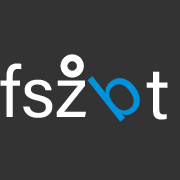
<style>
.page{position:relative;width:180px;height:180px;background:#333333}
.page>*{position:absolute;margin:0}
.t1{font:72px "AcuminConcept-Regular";color:#ffffff;font-weight:bold;font-style:italic}
.t2{font:72px "AcuminConcept-Regular";color:#0093dd;font-weight:bold;font-style:italic}
</style>
<div class="page">
<p class="t1" style="left:0px;top:63px;width:86px;height:55px">fsz</p>
<p class="t2" style="left:87px;top:76px;width:53px;height:46px;rotate:-38deg">b</p>
<p class="t1" style="left:146px;top:71px;width:22px;height:49px">t</p>
</div>
